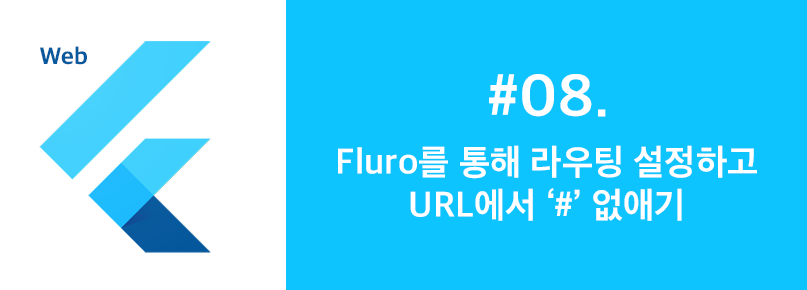
<style>
.page{position:relative;width:807px;height:290px;background:#0dc4ff}
.page>*{position:absolute;margin:0}
.t1{font:24px "AppleSDGothicNeoEB00";color:#08599d}
.t2{font:60px "AppleSDGothicNeoB00";color:#ffffff}
.t3{font:36px "AppleSDGothicNeoB00";color:#ffffff}
</style>
<div class="page">
<p class="t1" style="left:40px;top:46px;width:47px;height:19px">Web</p>
<p class="t2" style="left:489px;top:74px;width:117px;height:43px">#08.</p>
<p class="t3" style="left:338px;top:145px;width:419px;height:76px;text-align:center">Fluro를 통해 라우팅 설정하고<br>URL에서 ‘#’ 없애기</p>
</div>
